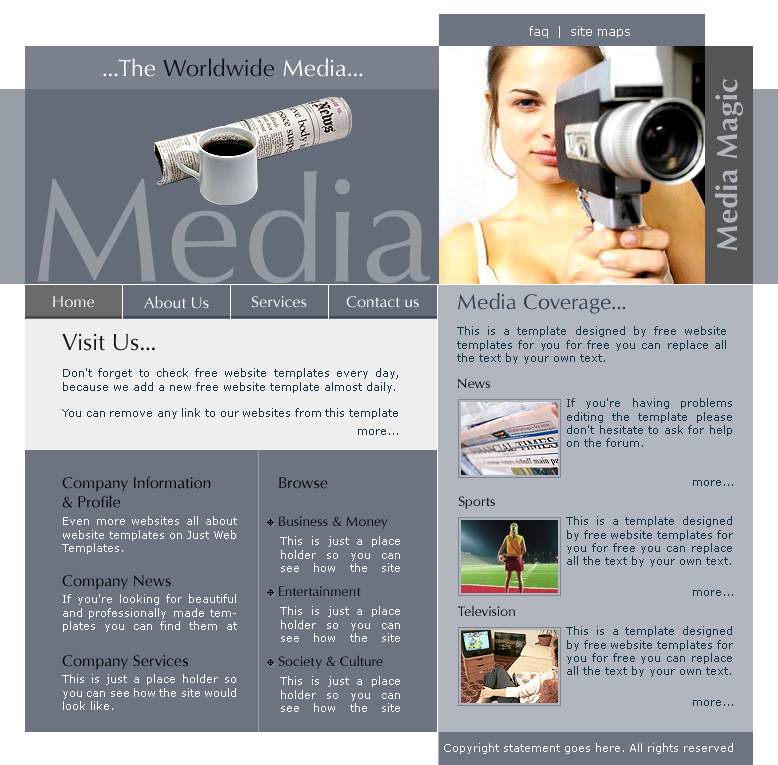
<style>
.page{position:relative;width:778px;height:765px;background:#6d7481}
.page>*{position:absolute;margin:0}
.t1{font:12px "Verdana";color:#ffffff}
.t2{font:30px "Harrow-Bold";color:#b1b6bf}
.t3{font:150px "Harrow";color:#9398a1}
.t4{font:22px "Harrow";color:#323e51}
.t5{font:16px "Harrow";color:#ffffff}
.t6{font:11px "Verdana";color:#163348}
.t7{font:24px "Harrow";color:#0e1520}
.t8{font:14px "Harrow";color:#000000}
.t9{font:16px "Harrow";color:#000000}
.t10{font:11px "Verdana";color:#ffffff}
</style>
<div class="page">
<p class="t1" style="left:529px;top:26px;width:101px;height:12px">faq  |  site maps</p>
<p class="t2" style="left:714px;top:79px;width:29px;height:172px;rotate:-90deg">Media Magic</p>
<p class="t3" style="left:37px;top:170px;width:393px;height:114px">Media</p>
<p class="t4" style="left:458px;top:293px;width:168px;height:21px">Media Coverage...</p>
<p class="t5" style="left:53px;top:296px;width:41px;height:12px">Home</p>
<p class="t5" style="left:144px;top:296px;width:65px;height:13px">About Us</p>
<p class="t5" style="left:251px;top:296px;width:56px;height:12px">Services</p>
<p class="t5" style="left:346px;top:296px;width:73px;height:12px">Contact us</p>
<p class="t6" style="left:457px;top:326px;width:269px;height:38px;text-align:justify">This is a template designed by free website templates for you for free you can replace all the text by your own text.</p>
<p class="t7" style="left:62px;top:333px;width:93px;height:18px">Visit Us...</p>
<p class="t6" style="left:62px;top:368px;width:336px;height:51px;text-align:justify">Don't forget to check free website templates every day, because we add a new free website template almost daily.<br><br>You can remove any link to our websites from this template you're free to use the template without linking back to us.</p>
<p class="t8" style="left:458px;top:378px;width:32px;height:11px">News</p>
<p class="t6" style="left:567px;top:398px;width:165px;height:49px;text-align:justify">If you're having problems editing the template please don't hesitate to ask for help on the forum.</p>
<p class="t6" style="left:358px;top:429px;width:40px;height:6px">more...</p>
<p class="t9" style="left:62px;top:476px;width:149px;height:32px;text-align:justify">Company Information<br>&amp; Profile</p>
<p class="t9" style="left:279px;top:477px;width:49px;height:12px">Browse</p>
<p class="t6" style="left:693px;top:480px;width:40px;height:6px">more...</p>
<p class="t8" style="left:458px;top:496px;width:37px;height:13px">Sports</p>
<p class="t10" style="left:62px;top:516px;width:175px;height:38px;text-align:justify">Even more websites all about website templates on Just Web Templates.</p>
<p class="t8" style="left:279px;top:516px;width:109px;height:13px">Business &amp; Money</p>
<p class="t6" style="left:566px;top:516px;width:167px;height:51px;text-align:justify">This is a template designed by free website templates for you for free you can replace all the text by your own text.</p>
<p class="t10" style="left:280px;top:536px;width:120px;height:36px;text-align:justify">This is just a place holder so you can see how the site would look like.</p>
<p class="t9" style="left:62px;top:575px;width:109px;height:15px">Company News</p>
<p class="t8" style="left:279px;top:586px;width:82px;height:10px">Entertainment</p>
<p class="t6" style="left:693px;top:590px;width:40px;height:6px">more...</p>
<p class="t10" style="left:63px;top:594px;width:174px;height:38px;text-align:justify">If you're looking for beautiful and professionally made templates you can find them at Template Beauty..</p>
<p class="t10" style="left:280px;top:606px;width:120px;height:36px;text-align:justify">This is just a place holder so you can see how the site would look like.</p>
<p class="t8" style="left:458px;top:605px;width:57px;height:11px">Television</p>
<p class="t6" style="left:566px;top:626px;width:167px;height:51px;text-align:justify">This is a template designed by free website templates for you for free you can replace all the text by your own text.</p>
<p class="t9" style="left:62px;top:655px;width:126px;height:15px">Company Services</p>
<p class="t8" style="left:278px;top:655px;width:105px;height:14px">Society &amp; Culture</p>
<p class="t10" style="left:62px;top:674px;width:174px;height:36px;text-align:justify">This is just a place holder so you can see how the site would look like.</p>
<p class="t10" style="left:280px;top:676px;width:120px;height:36px;text-align:justify">This is just a place holder so you can see how the site would look like.</p>
<p class="t6" style="left:693px;top:700px;width:40px;height:6px">more...</p>
<p class="t10" style="left:444px;top:743px;width:289px;height:11px">Copyright statement goes here. All rights reserved</p>
</div>
